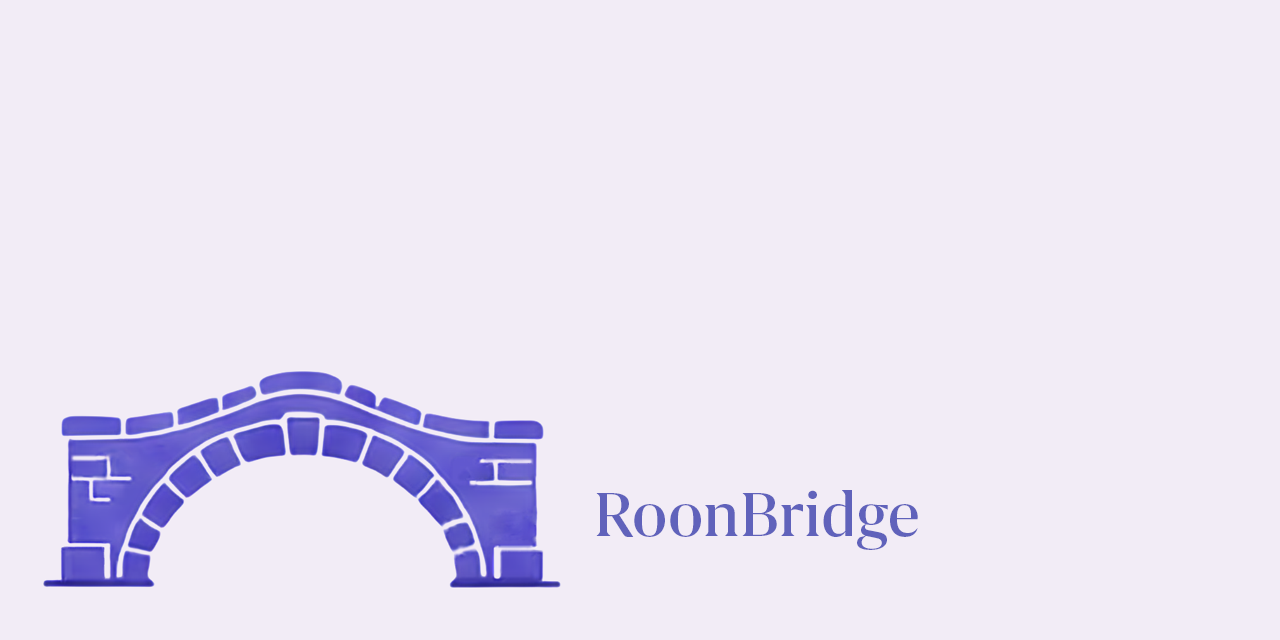
<style>
.page{position:relative;width:1280px;height:640px;background:#f2ecf6}
.page>*{position:absolute;margin:0}
.t1{font:72px "GrifoM-Medium";color:#6062bb}
</style>
<div class="page">
<p class="t1" style="left:596px;top:490px;width:322px;height:60px">RoonBridge</p>
</div>
